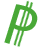
<style>
.page{position:relative;width:40px;height:48px;background:#ffffff}
.page>*{position:absolute;margin:0}
.t1{font:60px "MyriadPro-Regular";color:#49a837}
</style>
<div class="page">
<p class="t1" style="left:4px;top:4px;width:34px;height:40px;rotate:17deg">P</p>
</div>
